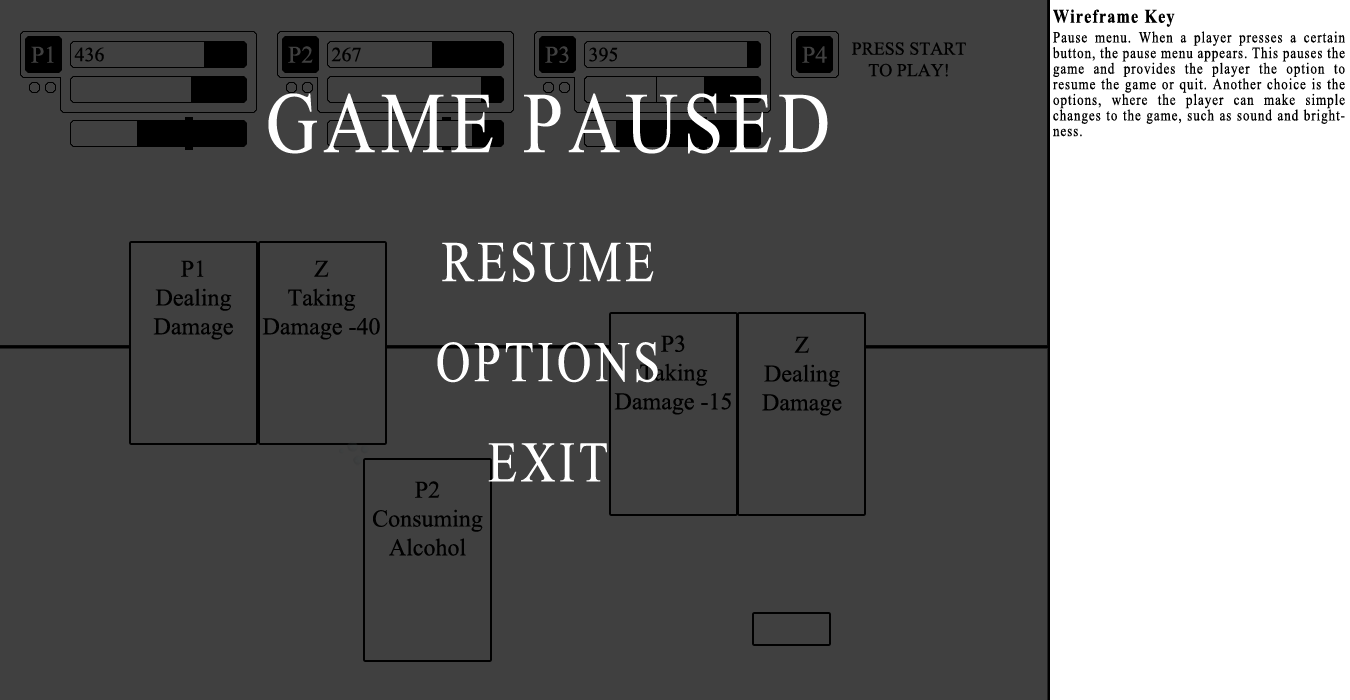
<style>
.page{position:relative;width:1350px;height:700px;background:#404040}
.page>*{position:absolute;margin:0}
.t1{font:15.6px "TimesNewRomanPSMT";letter-spacing:0.075em;color:#000000;scale:0.83 1}
.t2{font:19.2px "TimesNewRomanPS-BoldMT";letter-spacing:0.075em;color:#000000;scale:0.83 1}
.t3{font:24px "TimesNewRomanPSMT";color:#404040}
.t4{font:20px "TimesNewRomanPSMT";color:#000000}
.t5{font:18px "TimesNewRomanPSMT";color:#000000}
.t6{font:57.6px "TimesNewRomanPSMT";letter-spacing:0.075em;color:#ffffff;scale:0.83 1}
.t7{font:86.4px "TimesNewRomanPSMT";letter-spacing:0.075em;color:#ffffff;scale:0.83 1}
.t8{font:24px "TimesNewRomanPSMT";color:#000000}
</style>
<div class="page">
<p class="t1" style="left:1052px;top:9px;width:293px;height:128px;text-align:justify"><span class="t2">Wireframe Key<br><br></span>Pause menu. When a player presses a certain button, the pause menu appears. This pauses the game and provides the player the option to resume the game or quit. Another choice is the options, where the player can make simple changes to the game, such as sound and brightness.</p>
<p class="t3" style="left:31px;top:46px;width:23px;height:17px">P1</p>
<p class="t4" style="left:74px;top:47px;width:30px;height:15px">436</p>
<p class="t3" style="left:288px;top:46px;width:25px;height:17px">P2</p>
<p class="t4" style="left:331px;top:47px;width:30px;height:15px">267</p>
<p class="t3" style="left:545px;top:46px;width:24px;height:17px">P3</p>
<p class="t4" style="left:589px;top:47px;width:29px;height:15px">395</p>
<p class="t3" style="left:802px;top:46px;width:25px;height:17px">P4</p>
<p class="t5" style="left:852px;top:42px;width:114px;height:35px;text-align:center">PRESS START TO PLAY!</p>
<p class="t6" style="left:268px;top:93px;width:560px;height:389px;text-align:center"><span class="t7">GAME PAUSED<br><br></span>RESUME<br><br>OPTIONS<br><br>EXIT</p>
<p class="t8" style="left:153px;top:260px;width:80px;height:80px;text-align:center">P1<br>Dealing<br>Damage</p>
<p class="t8" style="left:262px;top:260px;width:118px;height:80px;text-align:center">Z<br>Taking<br>Damage -40</p>
<p class="t8" style="left:614px;top:335px;width:117px;height:80px;text-align:center">P3<br>Taking<br>Damage -15</p>
<p class="t8" style="left:762px;top:336px;width:80px;height:80px;text-align:center">Z<br>Dealing<br>Damage</p>
<p class="t8" style="left:373px;top:481px;width:110px;height:75px;text-align:center">P2<br>Consuming Alcohol</p>
</div>
